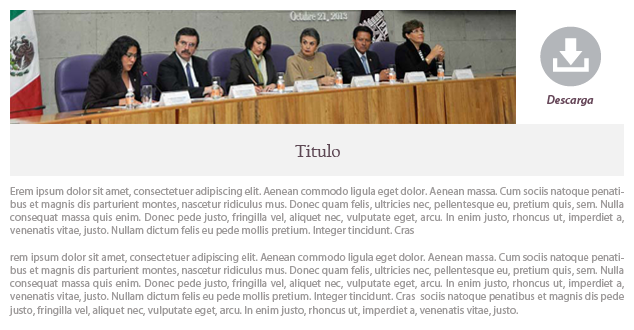
<style>
.page{position:relative;width:634px;height:330px;background:#ffffff}
.page>*{position:absolute;margin:0}
.t1{font:12px "MyriadPro-SemiboldIt";color:#664759}
.t2{font:18px "CalifornianFB-Reg";color:#5d4854}
.t3{font:11px "MyriadPro-Regular";color:#9f9c9c}
</style>
<div class="page">
<p class="t1" style="left:547px;top:95px;width:47px;height:11px">Descarga</p>
<p class="t2" style="left:295px;top:144px;width:45px;height:13px">Titulo</p>
<p class="t3" style="left:9px;top:187px;width:615px;height:129px;text-align:justify">Erem ipsum dolor sit amet, consectetuer adipiscing elit. Aenean commodo ligula eget dolor. Aenean massa. Cum sociis natoque penatibus et magnis dis parturient montes, nascetur ridiculus mus. Donec quam felis, ultricies nec, pellentesque eu, pretium quis, sem. Nulla consequat massa quis enim. Donec pede justo, fringilla vel, aliquet nec, vulputate eget, arcu. In enim justo, rhoncus ut, imperdiet a, venenatis vitae, justo. Nullam dictum felis eu pede mollis pretium. Integer tincidunt. Cras <br><br>rem ipsum dolor sit amet, consectetuer adipiscing elit. Aenean commodo ligula eget dolor. Aenean massa. Cum sociis natoque penatibus et magnis dis parturient montes, nascetur ridiculus mus. Donec quam felis, ultricies nec, pellentesque eu, pretium quis, sem. Nulla consequat massa quis enim. Donec pede justo, fringilla vel, aliquet nec, vulputate eget, arcu. In enim justo, rhoncus ut, imperdiet a, venenatis vitae, justo. Nullam dictum felis eu pede mollis pretium. Integer tincidunt. Cras  sociis natoque penatibus et magnis dis pede justo, fringilla vel, aliquet nec, vulputate eget, arcu. In enim justo, rhoncus ut, imperdiet a, venenatis vitae, justo.</p>
</div>
